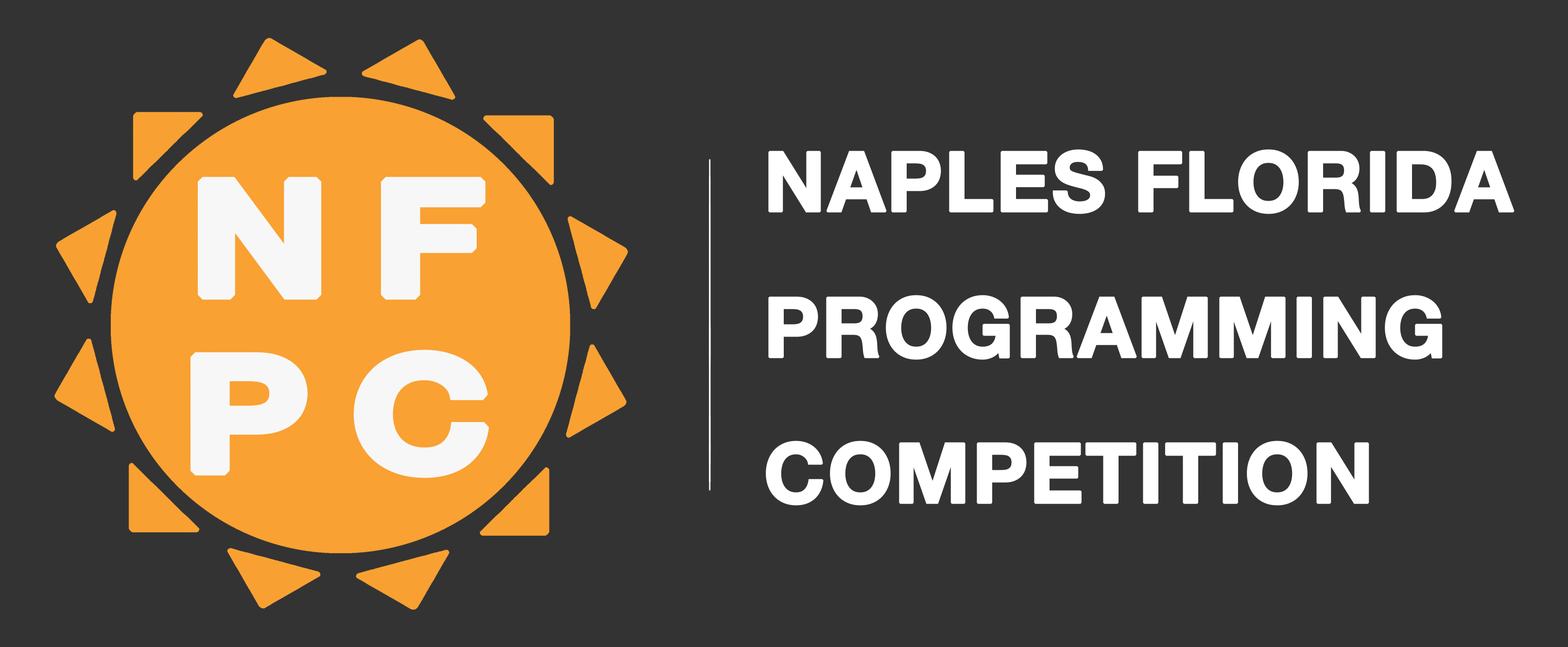
<style>
.page{position:relative;width:1568px;height:647px;background:#333333}
.page>*{position:absolute;margin:0}
.t1{font:83px/145.8px "HelveticaNeue-Bold";color:#ffffff;font-weight:bold}
.t2{font:159px/176px "HelveticaNeue-Bold";letter-spacing:0.2em;color:#f7f7f7;font-weight:bold;scale:1.19 1}
</style>
<div class="page">
<p class="t1" style="left:766px;top:149px;width:749px;height:357px">NAPLES FLORIDA<br>PROGRAMMING<br>COMPETITION</p>
<p class="t2" style="left:190px;top:177px;width:299px;height:301px;text-align:center">NF<br>PC</p>
</div>
